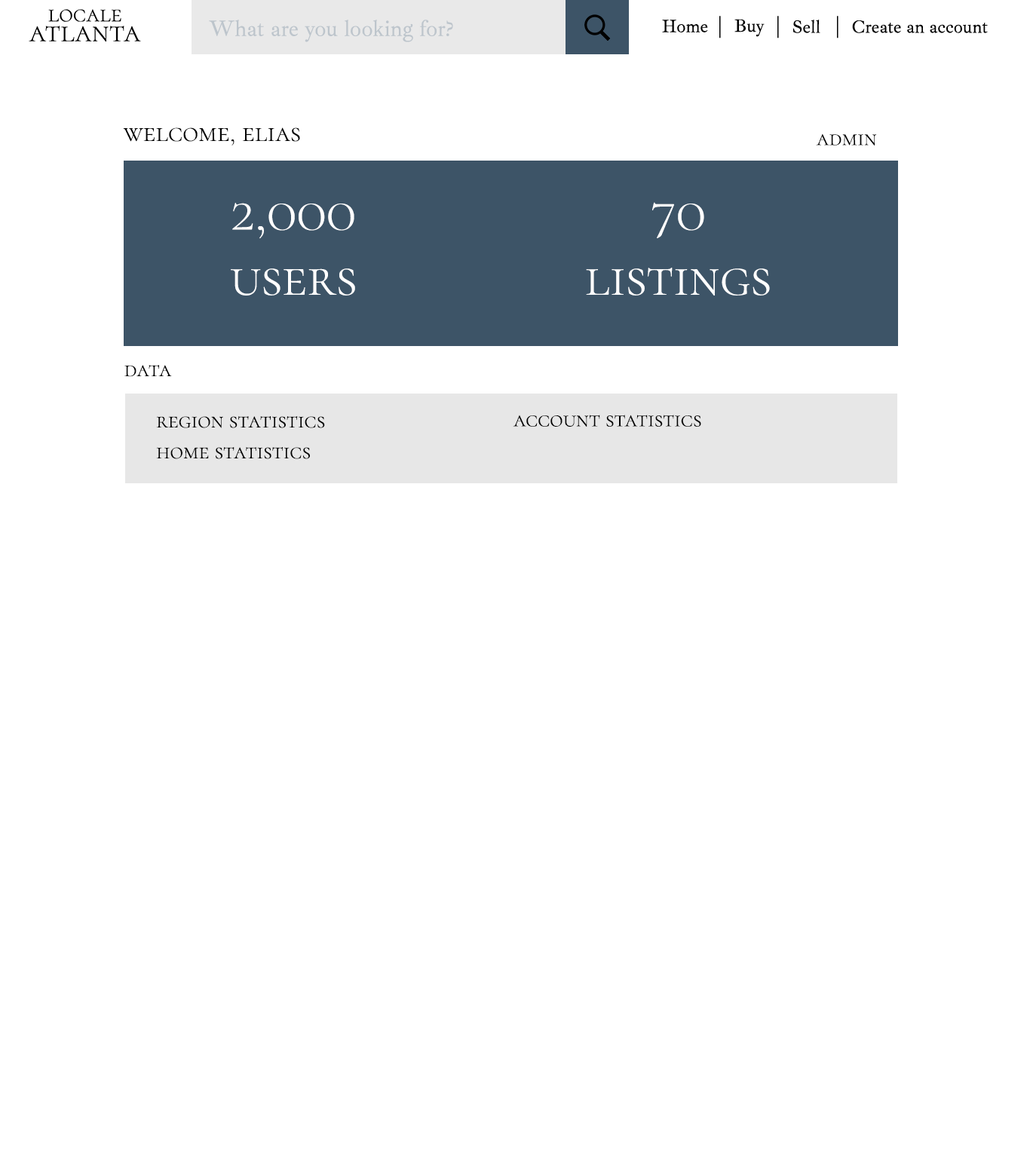
<style>
.page{position:relative;width:1030px;height:1158px;background:#ffffff}
.page>*{position:absolute;margin:0}
.t1{font:27.1px "CormorantSC-Light";color:#000000}
.t2{font:22.6px "CormorantSC-Light";color:#000000}
.t3{font:54.3px "CormorantSC-Light";color:#ffffff}
</style>
<div class="page">
<p class="t1" style="left:123px;top:127px;width:177px;height:18px">welcome, elias</p>
<p class="t2" style="left:816px;top:133px;width:61px;height:12px">admin</p>
<p class="t3" style="left:231px;top:203px;width:124px;height:93px;text-align:center">2,000<br>users</p>
<p class="t3" style="left:586px;top:202px;width:184px;height:94px;text-align:center">70<br>listings</p>
<p class="t2" style="left:124px;top:365px;width:48px;height:12px">data</p>
<p class="t2" style="left:156px;top:416px;width:169px;height:12px">region statistics</p>
<p class="t2" style="left:513px;top:415px;width:188px;height:12px">account statistics</p>
<p class="t2" style="left:156px;top:447px;width:154px;height:12px">home statistics</p>
</div>
